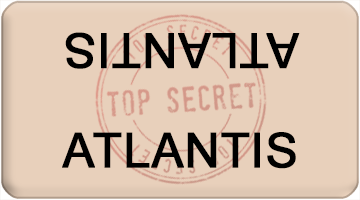
<style>
.page{position:relative;width:360px;height:200px;background:#e8d0bb}
.page>*{position:absolute;margin:0}
.t1{font:48px "ArialMT";color:#000000;font-weight:bold}
</style>
<div class="page">
<p class="t1" style="left:65px;top:32px;width:235px;height:37px;rotate:180deg">ATLANTIS</p>
<p class="t1" style="left:62px;top:132px;width:234px;height:37px">ATLANTIS</p>
</div>
